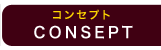
<style>
.page{position:relative;width:161px;height:50px;background:#400012}
.page>*{position:absolute;margin:0}
.t1{font:11.2px "HiraKakuPro-W6";letter-spacing:0.1em;color:#ffd800}
.t2{font:15.3px "HiraKakuPro-W6";letter-spacing:0.2em;color:#ffffff}
</style>
<div class="page">
<p class="t1" style="left:53px;top:9px;width:57px;height:11px">コンセプト</p>
<p class="t2" style="left:34px;top:25px;width:99px;height:14px">CONSEPT</p>
</div>
